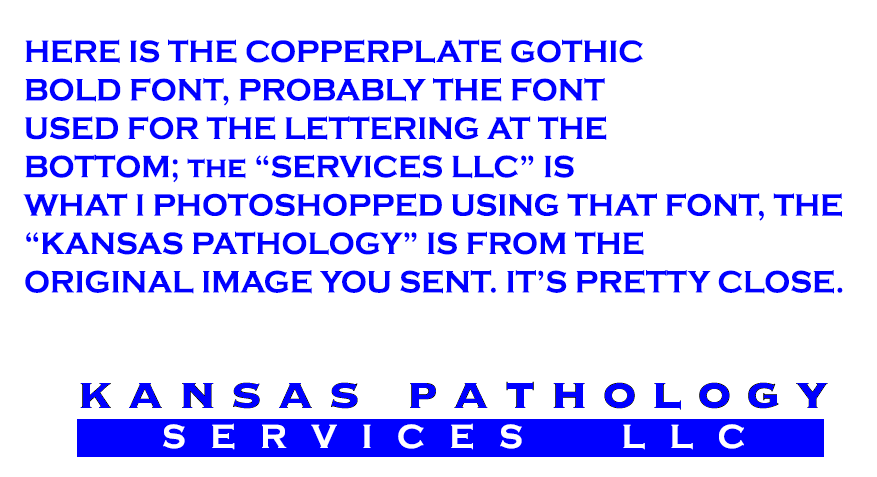
<style>
.page{position:relative;width:877px;height:477px;background:#ffffff}
.page>*{position:absolute;margin:0}
.t1{font:32px "CopperplateGothic-Bold";color:#0000ff;scale:0.95 1}
.t2{font:34.7px "CopperplateGothic-Bold";color:#ffffff;scale:0.95 1}
</style>
<div class="page">
<p class="t1" style="left:23px;top:39px;width:820px;height:255px">HERE IS THE COPPERPLATE GOTHIC<br>BOLD FONT, PROBABLY THE FONT <br>USED FOR THE LETTERING AT THE<br>BOTTOM; the “SERVICES LLC” IS<br>WHAT I PHOTOSHOPPED USING THAT FONT, THE <br>“KANSAS PATHOLOGY” IS FROM THE<br>ORIGINAL IMAGE YOU SENT. IT’S PRETTY CLOSE.</p>
<p class="t2" style="left:163px;top:423px;width:581px;height:27px">S   E   R   V   I   C   E   S            L   L   C</p>
</div>
